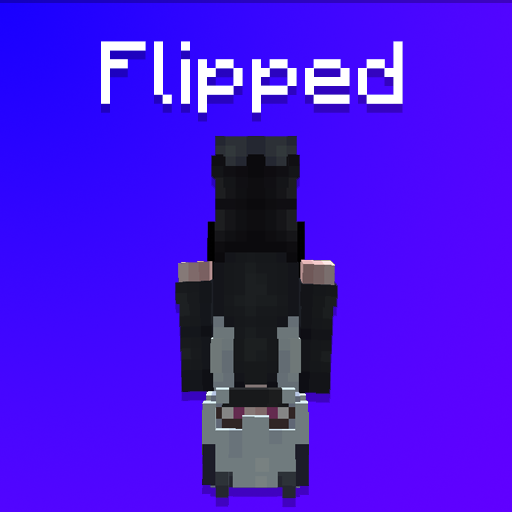
<style>
.page{position:relative;width:512px;height:512px}
.page>*{position:absolute;margin:0}
.t1{font:70.9px "Minecraftia-Regular";color:#ffffff}
</style>
<div class="page">
<p class="t1" style="left:101px;top:41px;width:302px;height:72px">Flipped</p>
</div>
